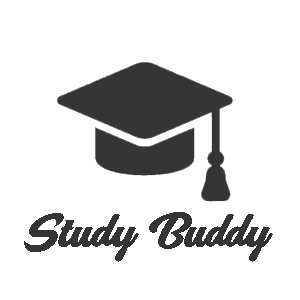
<style>
.page{position:relative;width:300px;height:300px;background:#ffffff}
.page>*{position:absolute;margin:0}
.t1{font:41.1px "BreezePersonalUse-Regular";color:#353535}
</style>
<div class="page">
<p class="t1" style="left:24px;top:212px;width:249px;height:50px">Study Buddy</p>
</div>
